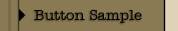
<style>
.page{position:relative;width:178px;height:31px;background:#897a53}
.page>*{position:absolute;margin:0}
.t1{font:15px "AmerTypewriterITCbyBT-Medium";color:#000000}
</style>
<div class="page">
<p class="t1" style="left:34px;top:9px;width:108px;height:14px">Button Sample</p>
</div>
